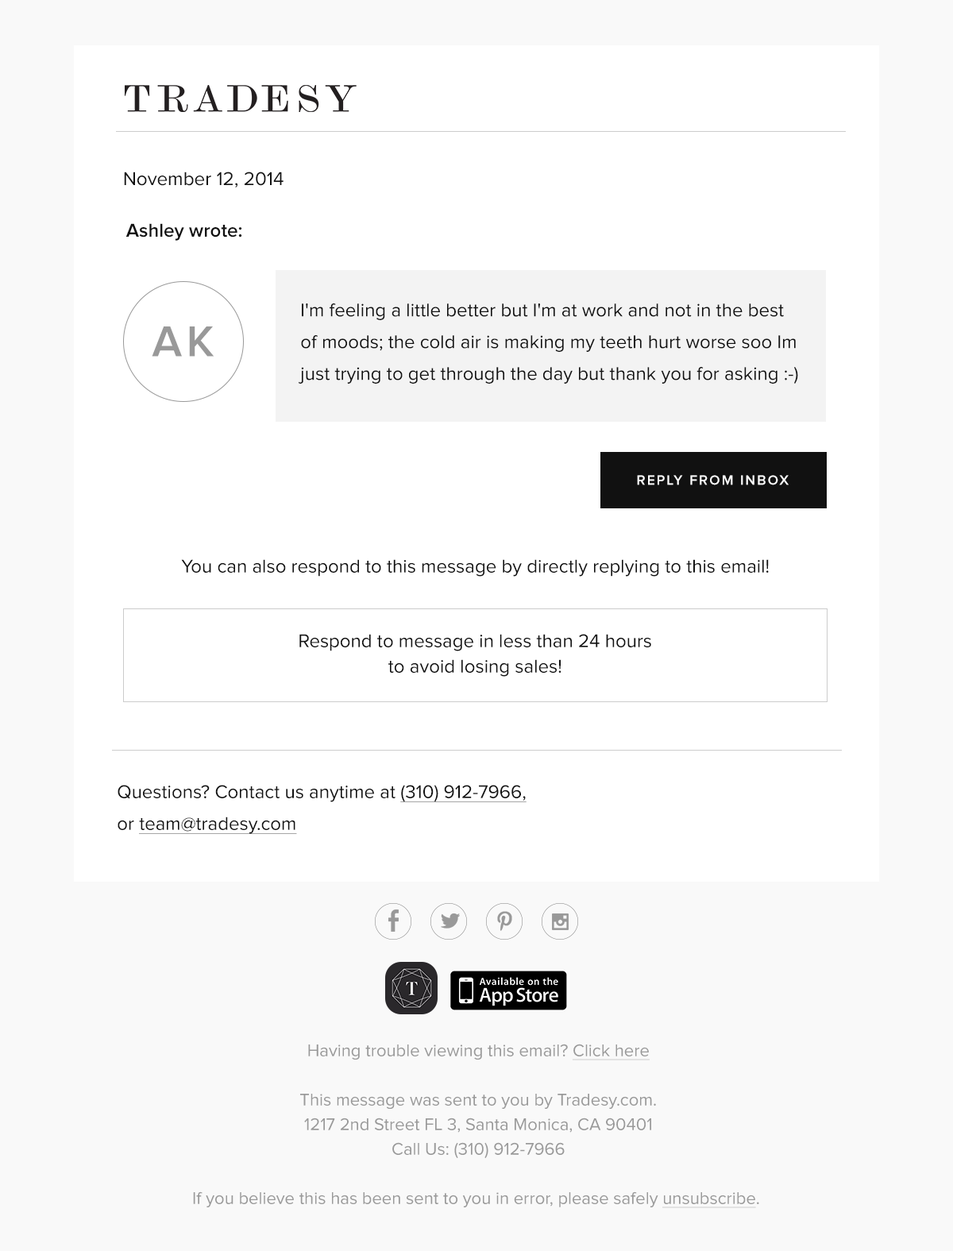
<style>
.page{position:relative;width:953px;height:1251px;background:#ffffff}
.page>*{position:absolute;margin:0}
.t1{font:19.2px "ProximaNova-Regular";color:#111111}
.t2{font:19.2px "ProximaNova-Semibold";color:#111111}
.t3{font:19.1px/31.8px "ProximaNova-Regular";color:#111111}
.t4{font:44.6px "ProximaNova-Semibold";letter-spacing:0.1em;color:#999999}
.t5{font:13.9px "ProximaNova-Semibold";letter-spacing:0.12em;color:#ffffff}
.t6{font:19.1px "ProximaNova-Regular";color:#111111}
.t7{font:19.1px/25.4px "ProximaNova-Regular";color:#111111}
.t8{font:19.1px/31.8px "ProximaNova-Regular";color:#111111;text-decoration:underline}
.t9{font:17.5px/24.6px "ProximaNova-Regular";color:#999999}
.t10{font:17.5px/24.6px "ProximaNova-Regular";color:#999999;text-decoration:underline}
</style>
<div class="page">
<p class="t1" style="left:124px;top:172px;width:160px;height:15px">November 12, 2014</p>
<p class="t2" style="left:125px;top:223px;width:117px;height:18px">Ashley wrote:</p>
<p class="t3" style="left:299px;top:303px;width:499px;height:81px">I'm feeling a little better but I'm at work and not in the best of moods; the cold air is making my teeth hurt worse soo Im just trying to get through the day but thank you for asking :-)</p>
<p class="t4" style="left:152px;top:326px;width:62px;height:31px">AK</p>
<p class="t5" style="left:637px;top:475px;width:152px;height:10px">REPLY FROM INBOX</p>
<p class="t6" style="left:181px;top:559px;width:588px;height:18px">You can also respond to this message by directly replying to this email!</p>
<p class="t7" style="left:299px;top:634px;width:352px;height:43px;text-align:center">Respond to message in less than 24 hours<br>to avoid losing sales!</p>
<p class="t3" style="left:118px;top:785px;width:409px;height:49px">Questions? Contact us anytime at <span class="t8">(310) 912-7966,<br></span>or <span class="t8">team@tradesy.com</span></p>
<p class="t9" style="left:193px;top:1044px;width:566px;height:164px;text-align:center">Having trouble viewing this email? <span class="t10">Click here<br></span><br>This message was sent to you by Tradesy.com.<br>1217 2nd Street FL 3, Santa Monica, CA 90401<br>Call Us: (310) 912-7966<br><br>If you believe this has been sent to you in error, please safely <span class="t10">unsubscribe</span>.</p>
</div>
